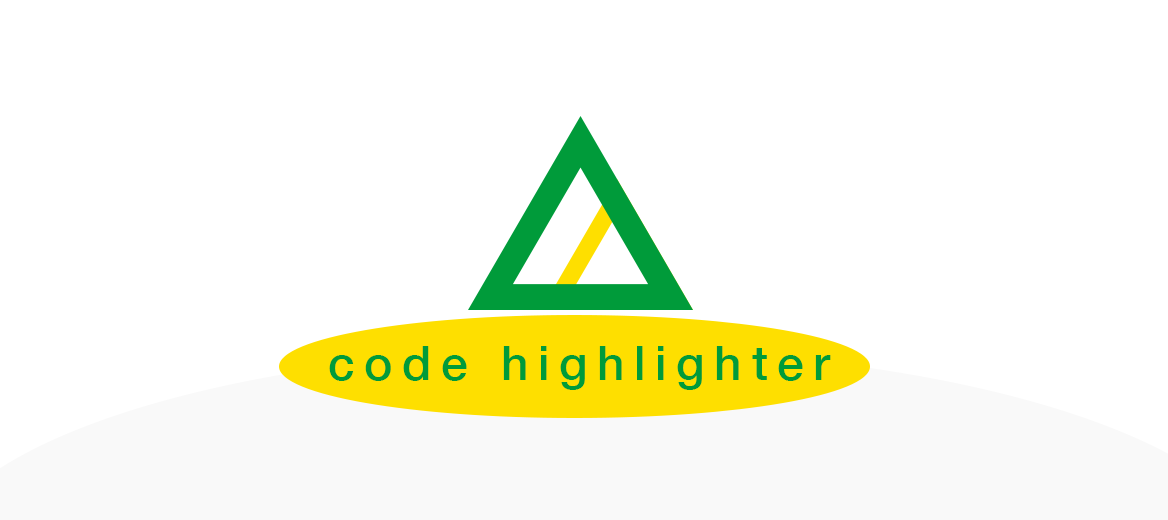
<style>
.page{position:relative;width:1168px;height:520px;background:#ffffff}
.page>*{position:absolute;margin:0}
.t1{font:48px "HelveticaNeue-Medium";letter-spacing:0.2em;color:#009b3a}
</style>
<div class="page">
<p class="t1" style="left:329px;top:346px;width:502px;height:44px">code highlighter</p>
</div>
